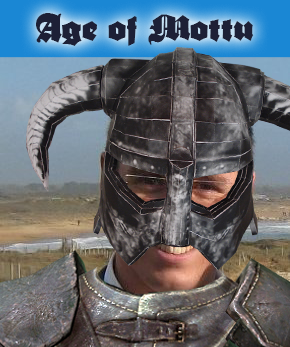
<style>
.page{position:relative;width:290px;height:347px}
.page>*{position:absolute;margin:0}
.t1{font:30px "AsgardianWarsBlack";color:#1d2036}
</style>
<div class="page">
<p class="t1" style="left:36px;top:13px;width:218px;height:33px">Age of Mottu</p>
</div>
